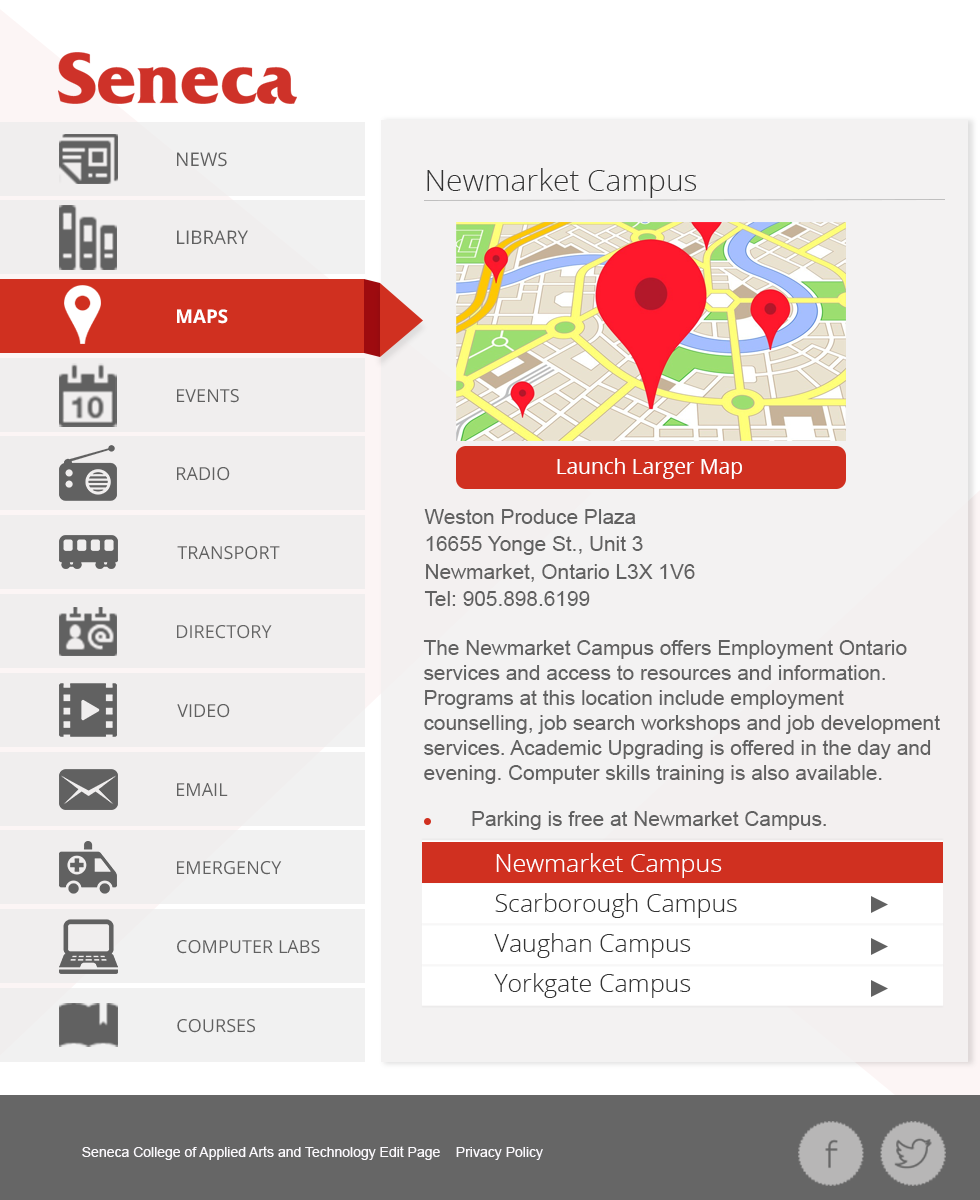
<style>
.page{position:relative;width:980px;height:1200px;background:#f3f2f2}
.page>*{position:absolute;margin:0}
.t1{font:30px "OpenSans-Light";color:#333333}
.t2{font:20.8px/25px "ArialMT";color:#616161}
.t3{font:20.8px "ArialMT";color:#616161}
.t4{font:25px/37.5px "OpenSans-Light";color:#333333}
.t5{font:25px/37.5px "OpenSans-Light";color:#ffffff}
</style>
<div class="page">
<p class="t1" style="left:427px;top:168px;width:270px;height:30px">Newmarket Campus</p>
<p class="t2" style="left:424px;top:509px;width:271px;height:97px">Weston Produce Plaza<br>16655 Yonge St., Unit 3<br>Newmarket, Ontario L3X 1V6<br>Tel: 905.898.6199</p>
<p class="t2" style="left:423px;top:640px;width:517px;height:144px">The Newmarket Campus offers Employment Ontario services and access to resources and information. Programs at this location include employment counselling, job search workshops and job development services. Academic Upgrading is offered in the day and evening. Computer skills training is also available.</p>
<p class="t3" style="left:472px;top:811px;width:354px;height:19px">Parking is free at Newmarket Campus.</p>
<p class="t4" style="left:494px;top:853px;width:243px;height:145px"><span class="t5">Newmarket Campus<br></span>Scarborough Campus<br>Vaughan Campus<br>Yorkgate Campus</p>
</div>
